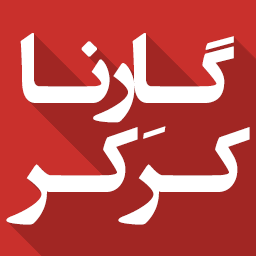
<style>
.page{position:relative;width:256px;height:256px;background:#a12623}
.page>*{position:absolute;margin:0}
.t1{font:110.5px "AEntezareZohoor1**-Bold";color:#ffffff}
</style>
<div class="page">
<p class="t1" style="left:20px;top:33px;width:214px;height:90px">گـارنـا</p>
<p class="t1" style="left:6px;top:126px;width:244px;height:99px">کـرَکـر</p>
</div>
